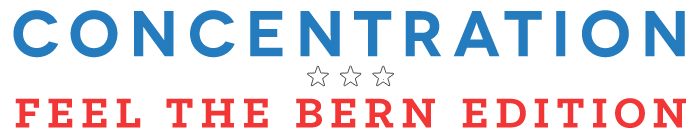
<style>
.page{position:relative;width:700px;height:140px;background:#ffffff}
.page>*{position:absolute;margin:0}
.t1{font:64.2px "Novecentowide-DemiBold";letter-spacing:0.16em;color:#247bbe}
.t2{font:46.7px "KlinicSlab-Bold";letter-spacing:0.16em;color:#f23535}
</style>
<div class="page">
<p class="t1" style="left:13px;top:10px;width:672px;height:48px">CONCENTRAtION</p>
<p class="t2" style="left:15px;top:98px;width:671px;height:30px">FEEL THE BERN EDITION</p>
</div>
